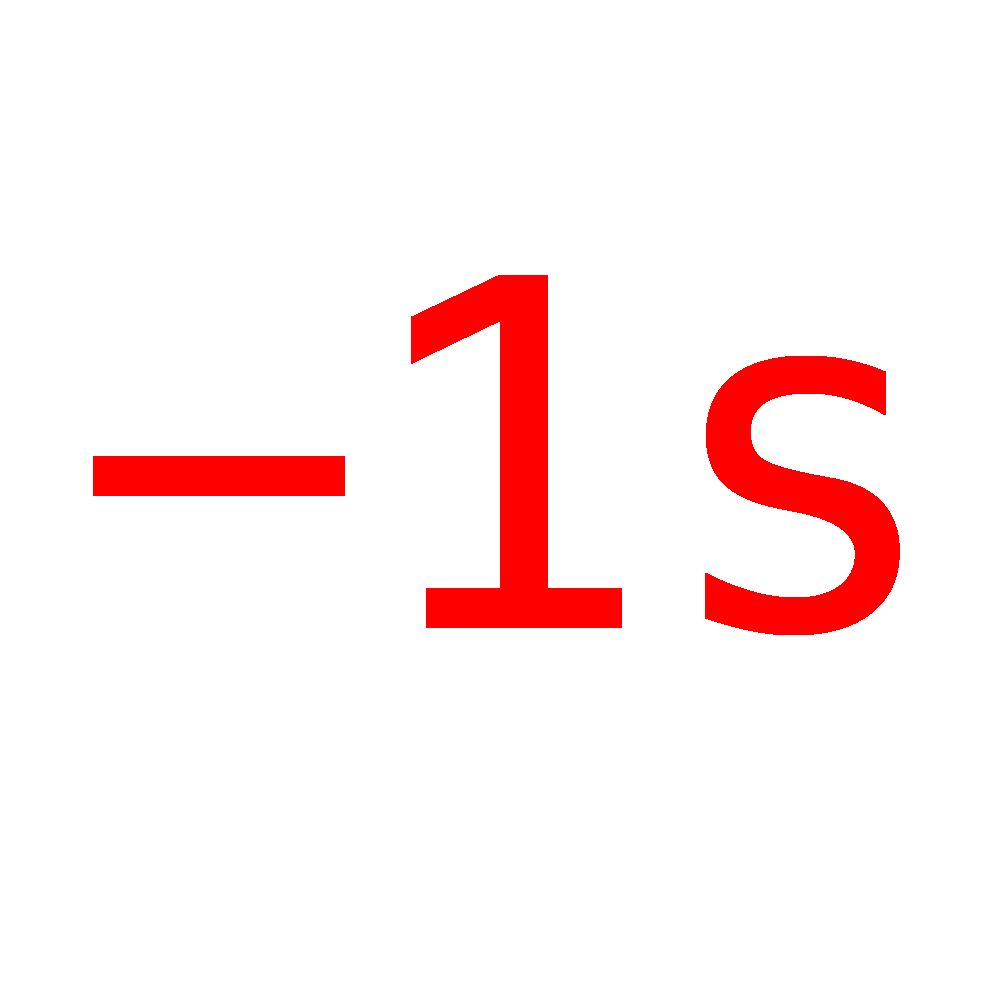
<style>
.page{position:relative;width:1000px;height:1000px;background:#ffffff}
.page>*{position:absolute;margin:0}
.t1{font:486.1px "Menlo-Regular";color:#ff0000}
</style>
<div class="page">
<p class="t1" style="left:93px;top:275px;width:807px;height:360px">-1s</p>
</div>
